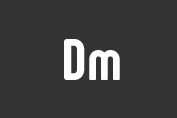
<style>
.page{position:relative;width:177px;height:118px;background:#333333}
.page>*{position:absolute;margin:0}
.t1{font:58.3px "Phenomena-ExtraBold";color:#fffefe}
</style>
<div class="page">
<p class="t1" style="left:64px;top:39px;width:56px;height:41px">Dm</p>
</div>
